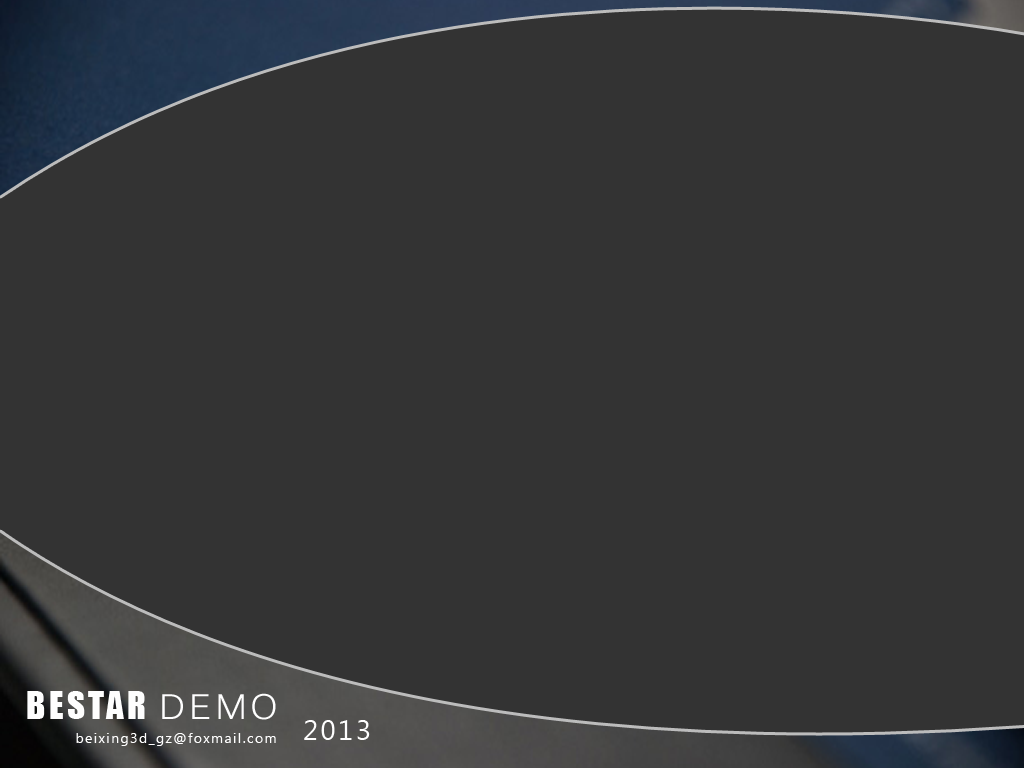
<style>
.page{position:relative;width:1024px;height:768px;background:#333333}
.page>*{position:absolute;margin:0}
.t1{font:34.7px "Impact";letter-spacing:0.1em;color:#fefefe}
.t2{font:34.7px "Kalinga";letter-spacing:0.1em;color:#fefefe}
.t3{font:27.6px "KhmerUI";letter-spacing:0.1em;color:#fefefe}
.t4{font:14px "KhmerUI";letter-spacing:0.1em;color:#fefefe}
</style>
<div class="page">
<p class="t1" style="left:27px;top:691px;width:249px;height:29px">BESTAR <span class="t2">DEMO</span></p>
<p class="t3" style="left:304px;top:720px;width:66px;height:20px">2013</p>
<p class="t4" style="left:76px;top:733px;width:200px;height:13px">beixing3d_gz@foxmail.com</p>
</div>
